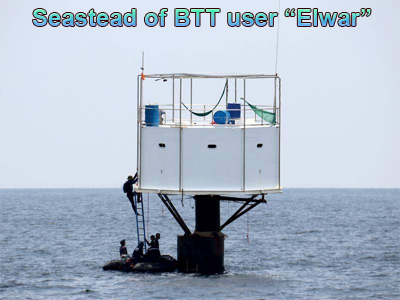
<style>
.page{position:relative;width:400px;height:300px}
.page>*{position:absolute;margin:0}
.t1{font:24px "Arial-BoldMT"}
</style>
<div class="page">
<p class="t1" style="left:32px;top:9px;width:339px;height:17px">Seastead of BTT user “Elwar”</p>
</div>
